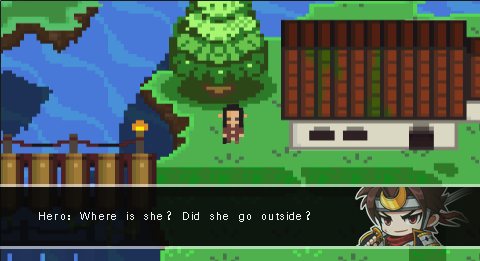
<style>
.page{position:relative;width:480px;height:261px}
.page>*{position:absolute;margin:0}
.t1{font:12px "Vrinda";letter-spacing:0.1em;color:#fefefe}
</style>
<div class="page">
<p class="t1" style="left:39px;top:211px;width:271px;height:11px;opacity:0.9">Hero: Where is she? Did she go outside?</p>
</div>
